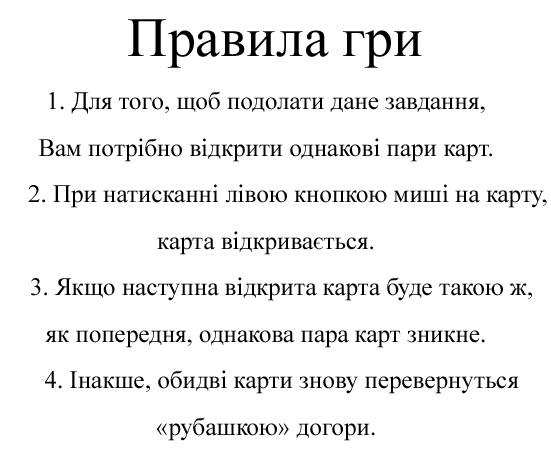
<style>
.page{position:relative;width:551px;height:472px;background:#ffffff}
.page>*{position:absolute;margin:0}
.t1{font:55.6px "TimesNewRomanPSMT";color:#000000}
.t2{font:25px/46.5px "TimesNewRomanPSMT";color:#000000}
</style>
<div class="page">
<p class="t1" style="left:128px;top:19px;width:294px;height:49px">Правила гри</p>
<p class="t2" style="left:28px;top:91px;width:519px;height:350px;text-align:center">1. Для того, щоб подолати дане завдання,<br>Вам потрібно відкрити однакові пари карт.<br>       2. При натисканні лівою кнопкою миші на карту,<br>карта відкривається.<br>     3. Якщо наступна відкрита карта буде такою ж,<br>як попередня, однакова пара карт зникне.<br>     4. Інакше, обидві карти знову перевернуться<br>«рубашкою» догори.</p>
</div>
